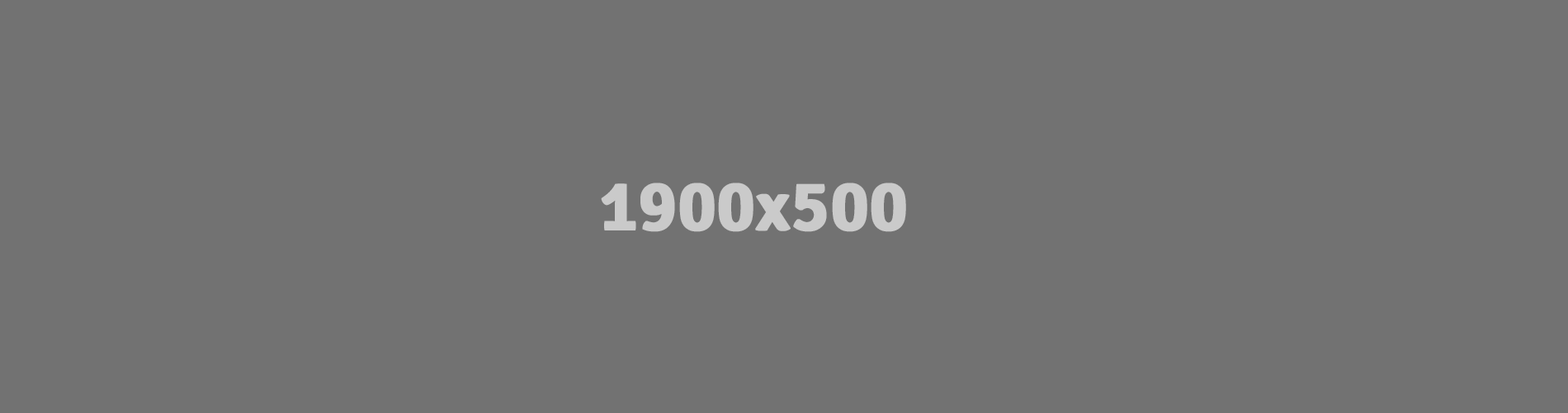
<style>
.page{position:relative;width:1568px;height:413px;background:#727272}
.page>*{position:absolute;margin:0}
.t1{font:70.3px "SignikaNegative-Bold";color:#cacaca;font-weight:bold}
</style>
<div class="page">
<p class="t1" style="left:601px;top:182px;width:305px;height:50px">1900x500</p>
</div>
